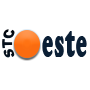
<style>
.page{position:relative;width:90px;height:90px;background:#ffffff}
.page>*{position:absolute;margin:0}
.t1{font:14.2px "Arial-Black";letter-spacing:0.05em;color:#060f1a;scale:0.73 1}
.t2{font:44.1px "CooperBlack";letter-spacing:0.05em;color:#0b1f35;scale:0.48 1}
</style>
<div class="page">
<p class="t1" style="left:2px;top:29px;width:13px;height:29px;rotate:-88deg">STC</p>
<p class="t2" style="left:42px;top:31px;width:45px;height:26px">este</p>
</div>
